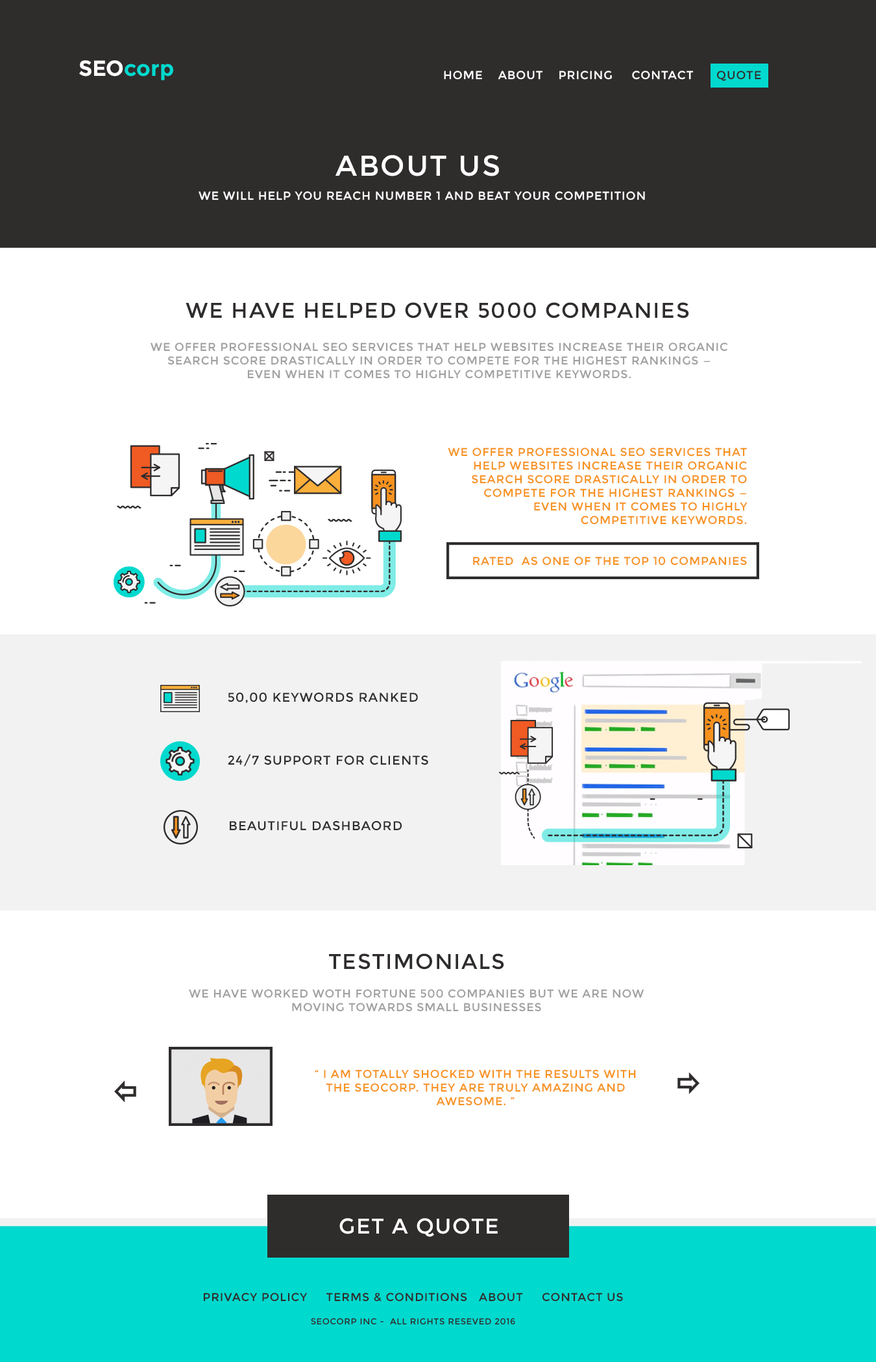
<style>
.page{position:relative;width:876px;height:1362px;background:#ffffff}
.page>*{position:absolute;margin:0}
.t1{font:21.7px "Montserrat-Bold";color:#00d9ce}
.t2{font:21.7px "Montserrat-Bold";color:#ffffff}
.t3{font:11.6px "Montserrat-Regular";letter-spacing:0.05em;color:#ffffff;text-transform:uppercase}
.t4{font:11.6px "Montserrat-Regular";letter-spacing:0.05em;color:#2f2c2c;text-transform:uppercase}
.t5{font:28.9px "Montserrat-Regular";letter-spacing:0.05em;color:#ffffff}
.t6{font:11.6px "Montserrat-Regular";letter-spacing:0.05em;color:#ffffff}
.t7{font:21.3px "Montserrat-Regular";letter-spacing:0.05em;color:#2f2c2c;text-transform:uppercase}
.t8{font:11.4px "Montserrat-Regular";letter-spacing:0.05em;color:#a0a0a0;text-transform:uppercase}
.t9{font:11.4px "Montserrat-Regular";letter-spacing:0.05em;color:#f7921e;text-transform:uppercase}
.t10{font:12.8px "Montserrat-Regular";letter-spacing:0.05em;color:#2f2c2c;text-transform:uppercase}
.t11{font:21.3px "Montserrat-Regular";letter-spacing:0.05em;color:#ffffff;text-transform:uppercase}
.t12{font:11.4px "Montserrat-Regular";letter-spacing:0.05em;color:#2f2c2c;text-transform:uppercase}
.t13{font:8.5px "Montserrat-Regular";letter-spacing:0.05em;color:#2f2c2c;text-transform:uppercase}
</style>
<div class="page">
<p class="t1" style="left:79px;top:60px;width:94px;height:20px"><span class="t2">SEO</span>corp</p>
<p class="t3" style="left:444px;top:71px;width:317px;height:10px">Home    About    pricing     Contact      <span class="t4">Quote</span></p>
<p class="t5" style="left:335px;top:155px;width:164px;height:21px">ABOUT US</p>
<p class="t6" style="left:198px;top:191px;width:447px;height:9px">WE WILL HELP YOU REACH NUMBER 1 AND BEAT YOUR COMPETITION</p>
<p class="t7" style="left:185px;top:302px;width:504px;height:16px">WE HAVE HELPED OVER 5000 COMPANIES</p>
<p class="t8" style="left:150px;top:342px;width:578px;height:37px;text-align:center">We offer professional SEO services that help websites increase their organic search score drastically in order to compete for the highest rankings — even when it comes to highly competitive keywords.</p>
<p class="t9" style="left:447px;top:447px;width:300px;height:119px;text-align:right">We offer professional SEO services that help websites increase their organic search score drastically in order to compete for the highest rankings — even when it comes to highly <br>competitive keywords.<br><br><br>RATED  AS ONE OF THE TOP 10 COMPANIES</p>
<p class="t10" style="left:228px;top:692px;width:190px;height:11px">50,00 keywords ranked</p>
<p class="t10" style="left:228px;top:754px;width:200px;height:13px">24/7 support for clients</p>
<p class="t10" style="left:230px;top:820px;width:171px;height:11px">beautiful dashbaord</p>
<p class="t7" style="left:329px;top:953px;width:175px;height:17px">testimonials</p>
<p class="t8" style="left:189px;top:989px;width:455px;height:23px;text-align:center">We have worked woth fortune 500 companies but we are now<br>moving towards small businesses</p>
<p class="t9" style="left:315px;top:1069px;width:321px;height:37px;text-align:center">“ i am totally shocked with the results with the seocorp. they are truly amazing and <br>awesome. ”</p>
<p class="t11" style="left:339px;top:1218px;width:158px;height:19px">get a quote</p>
<p class="t12" style="left:203px;top:1293px;width:420px;height:32px;text-align:center">privacy policy     terms &amp; conditions   about     contact us<br><br><span class="t13">seocorp inc -  all rights reseved 2016</span></p>
</div>
